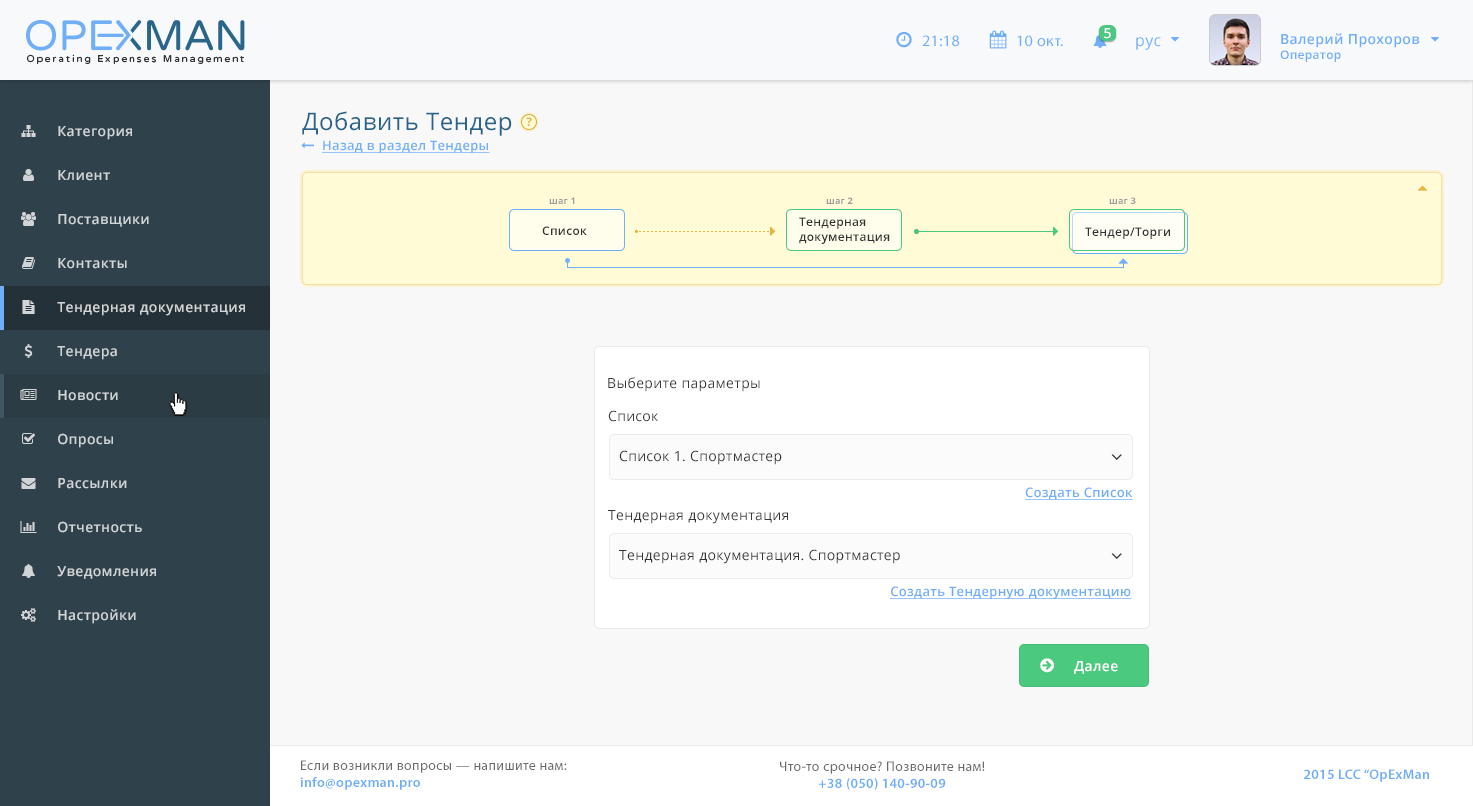
<style>
.page{position:relative;width:1473px;height:806px;background:#f8f8f8}
.page>*{position:absolute;margin:0}
.t1{font:13.9px "OpenSans-Semibold";letter-spacing:0.025em;color:#ffffff}
.t2{font:15.9px "MyriadPro-Regular";letter-spacing:0.025em;color:#6faff8}
.t3{font:15.9px "OpenSans";letter-spacing:0.025em;color:#6eaff8}
.t4{font:13.9px "OpenSans-Semibold";letter-spacing:0.025em;color:#6eaef7}
.t5{font:12px "OpenSans-Semibold";letter-spacing:0.025em;color:#6eaef7}
.t6{font:23.9px "OpenSans";letter-spacing:0.025em;color:#29658b}
.t7{font:13.9px "OpenSans-Semibold";letter-spacing:0.025em;color:#d2d5d7}
.t8{font:12px "OpenSans-Bold";letter-spacing:0.025em;color:#e8b742}
.t9{font:13px "OpenSans-Semibold";letter-spacing:0.025em;color:#6faff8;text-decoration:underline}
.t10{font:9px "OpenSans-Bold";letter-spacing:0.025em;color:#9d9d9d}
.t11{font:12px "OpenSans-Semibold";letter-spacing:0.025em;color:#323232}
.t12{font:13.9px "OpenSans";letter-spacing:0.025em;color:#373838}
.t13{font:13.9px "OpenSans";letter-spacing:0.025em;color:#333333}
.t14{font:13.9px "MyriadPro-Regular";letter-spacing:0.025em;color:#696969}
.t15{font:13.9px "MyriadPro-Semibold";letter-spacing:0.025em;color:#6eaef8}
</style>
<div class="page">
<p class="t1" style="left:1104px;top:28px;width:7px;height:11px">5</p>
<p class="t2" style="left:922px;top:35px;width:38px;height:12px">21:18</p>
<p class="t2" style="left:1017px;top:35px;width:46px;height:12px">10 окт.</p>
<p class="t3" style="left:1136px;top:37px;width:25px;height:13px">рус</p>
<p class="t4" style="left:1280px;top:33px;width:140px;height:29px">Валерий Прохоров<br><span class="t5">Оператор</span></p>
<p class="t6" style="left:302px;top:111px;width:210px;height:25px">Добавить Тендер</p>
<p class="t7" style="left:58px;top:126px;width:74px;height:14px">Категория</p>
<p class="t8" style="left:526px;top:117px;width:6px;height:9px">?</p>
<p class="t9" style="left:322px;top:140px;width:168px;height:13px">Назад в раздел Тендеры</p>
<p class="t7" style="left:58px;top:170px;width:52px;height:11px">Клиент</p>
<p class="t10" style="left:549px;top:197px;width:26px;height:7px">шаг 1</p>
<p class="t10" style="left:826px;top:197px;width:27px;height:7px">шаг 2</p>
<p class="t10" style="left:1109px;top:197px;width:27px;height:7px">шаг 3</p>
<p class="t7" style="left:58px;top:214px;width:91px;height:13px">Поставщики</p>
<p class="t11" style="left:799px;top:217px;width:91px;height:27px">Тендерная<br>документация</p>
<p class="t11" style="left:542px;top:226px;width:45px;height:9px">Список</p>
<p class="t11" style="left:1085px;top:227px;width:85px;height:12px">Тендер/Торги</p>
<p class="t7" style="left:58px;top:258px;width:69px;height:11px">Контакты</p>
<p class="t7" style="left:57px;top:302px;width:188px;height:14px">Тендерная документация</p>
<p class="t7" style="left:57px;top:346px;width:60px;height:14px">Тендера</p>
<p class="t12" style="left:608px;top:377px;width:152px;height:15px">Выберите параметры</p>
<p class="t7" style="left:58px;top:390px;width:60px;height:11px">Новости</p>
<p class="t12" style="left:608px;top:410px;width:50px;height:12px">Список</p>
<p class="t7" style="left:58px;top:433px;width:55px;height:15px">Опросы</p>
<p class="t13" style="left:619px;top:450px;width:163px;height:15px">Список 1. Спортмастер</p>
<p class="t7" style="left:58px;top:478px;width:69px;height:11px">Рассылки</p>
<p class="t9" style="left:1025px;top:487px;width:108px;height:13px">Создать Список</p>
<p class="t12" style="left:608px;top:510px;width:180px;height:14px">Тендерная документация</p>
<p class="t7" style="left:58px;top:521px;width:84px;height:12px">Отчетность</p>
<p class="t13" style="left:619px;top:549px;width:281px;height:15px">Тендерная документация. Спортмастер</p>
<p class="t7" style="left:57px;top:566px;width:99px;height:13px">Уведомления</p>
<p class="t9" style="left:890px;top:586px;width:242px;height:13px">Создать Тендерную документацию</p>
<p class="t7" style="left:58px;top:609px;width:78px;height:15px">Настройки</p>
<p class="t1" style="left:1074px;top:661px;width:44px;height:13px">Далее</p>
<p class="t14" style="left:300px;top:760px;width:267px;height:30px">Если возникли вопросы — напишите нам:<br><span class="t15">info@opexman.pro</span></p>
<p class="t14" style="left:780px;top:761px;width:205px;height:29px;text-align:center">Что-то срочное? Позвоните нам!<br><span class="t15">+38 (050) 140-90-09</span></p>
<p class="t15" style="left:1304px;top:769px;width:125px;height:13px">2015 LCC “OpExMan</p>
</div>
